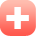
<style>
.page{position:relative;width:36px;height:36px;background:#ffffff}
.page>*{position:absolute;margin:0}
.t1{font:48px "Ubuntu-Bold";color:#ffffff}
</style>
<div class="page">
<p class="t1" style="left:6px;top:7px;width:23px;height:22px">+</p>
</div>
